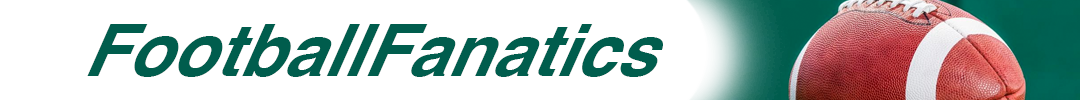
<style>
.page{position:relative;width:1080px;height:100px;background:#ffffff}
.page>*{position:absolute;margin:0}
.t1{font:73.9px "Helvetica-BoldOblique";color:#005d4d}
</style>
<div class="page">
<p class="t1" style="left:87px;top:24px;width:576px;height:53px">FootballFanatics</p>
</div>
